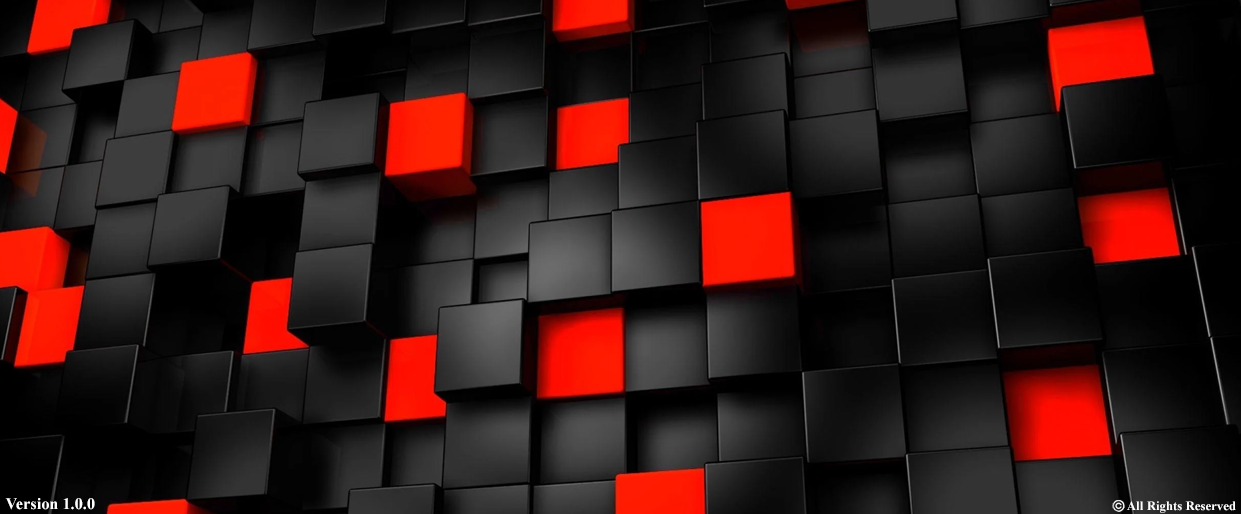
<style>
.page{position:relative;width:1241px;height:514px}
.page>*{position:absolute;margin:0}
.t1{font:16.4px "TimesNewRomanPS-BoldMT";color:#ffffff}
.t2{font:12.8px "TimesNewRomanPS-BoldMT";color:#ffffff}
</style>
<div class="page">
<p class="t1" style="left:5px;top:498px;width:90px;height:12px">Version 1.0.0</p>
<p class="t2" style="left:1127px;top:501px;width:109px;height:12px">All Rights Reserved</p>
</div>
